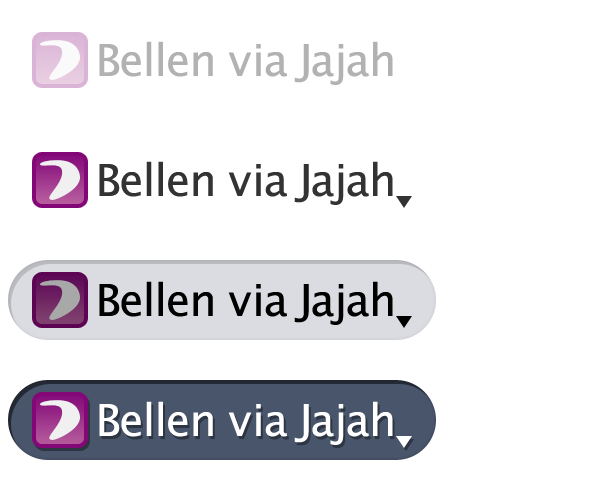
<style>
.page{position:relative;width:600px;height:480px;background:#ffffff}
.page>*{position:absolute;margin:0}
.t1{font:44px "LucidaGrande";letter-spacing:-0.01em;color:#b2b2b2}
.t2{font:44px "LucidaGrande";letter-spacing:-0.01em;color:#333333}
.t3{font:44px "LucidaGrande";letter-spacing:-0.01em;color:#000000}
.t4{font:44px "LucidaGrande";letter-spacing:-0.01em;color:#ffffff}
</style>
<div class="page">
<p class="t1" style="left:99px;top:41px;width:294px;height:44px">Bellen via Jajah</p>
<p class="t2" style="left:99px;top:161px;width:294px;height:44px">Bellen via Jajah</p>
<p class="t3" style="left:99px;top:281px;width:294px;height:44px">Bellen via Jajah</p>
<p class="t4" style="left:99px;top:401px;width:294px;height:44px">Bellen via Jajah</p>
</div>
